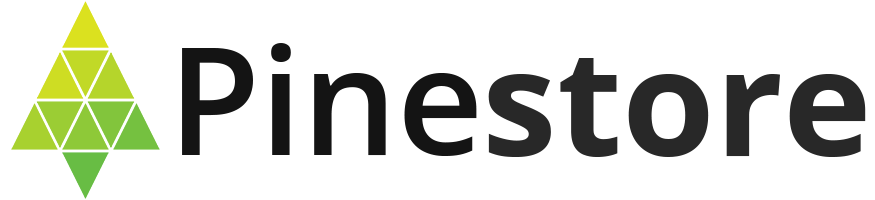
<style>
.page{position:relative;width:875px;height:200px;background:#ffffff}
.page>*{position:absolute;margin:0}
.t1{font:150px "OpenSansRoman-SemiBold";color:#141414}
.t2{font:150px "OpenSansRoman-Bold";color:#282828}
</style>
<div class="page">
<p class="t1" style="left:182px;top:43px;width:295px;height:113px">Pine</p>
<p class="t2" style="left:488px;top:58px;width:378px;height:99px">store</p>
</div>
